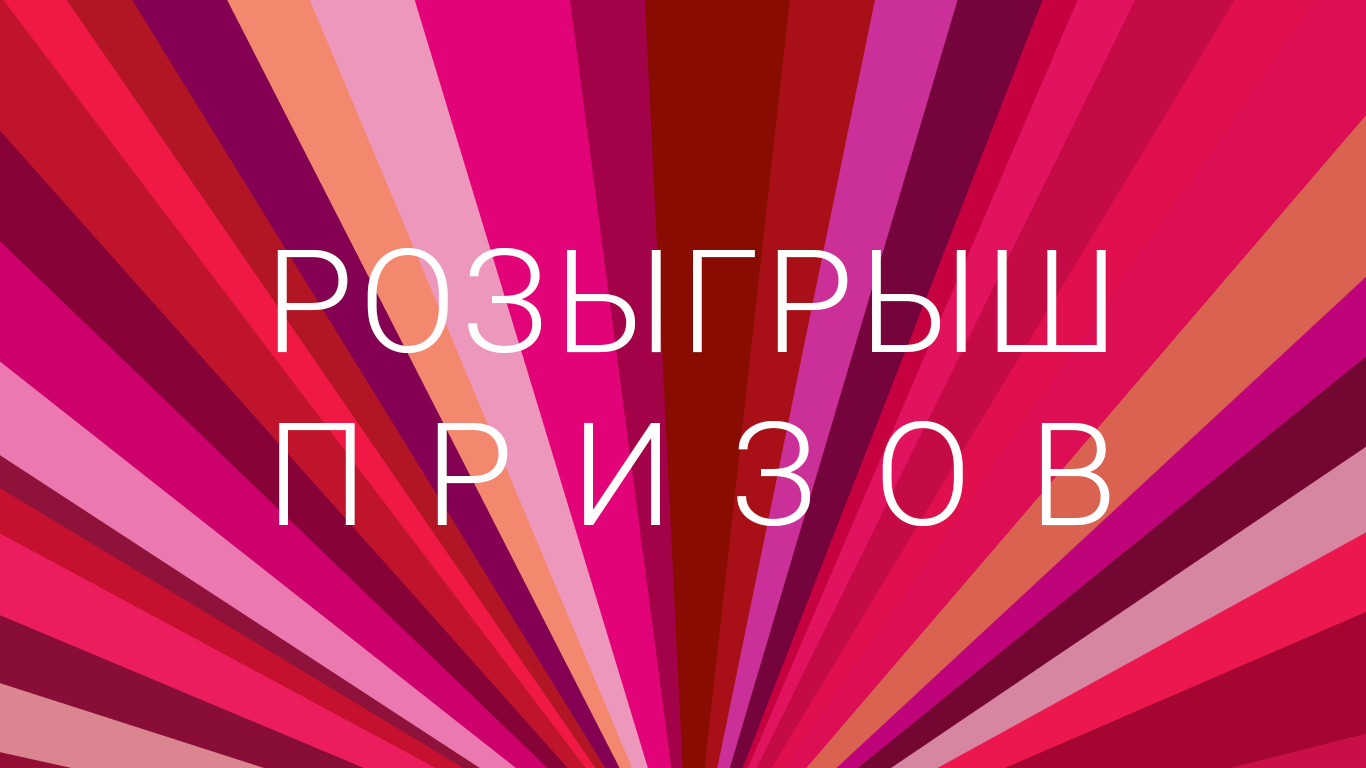
<style>
.page{position:relative;width:1366px;height:768px}
.page>*{position:absolute;margin:0}
.t1{font:144px "Roboto-Light";letter-spacing:0.04em;color:#fefefe}
.t2{font:144px "Roboto-Light";letter-spacing:0.4em;color:#fefefe}
</style>
<div class="page">
<p class="t1" style="left:277px;top:248px;width:833px;height:278px;text-align:center">РОЗЫГРЫШ<br><span class="t2">ПРИЗОВ</span></p>
</div>
